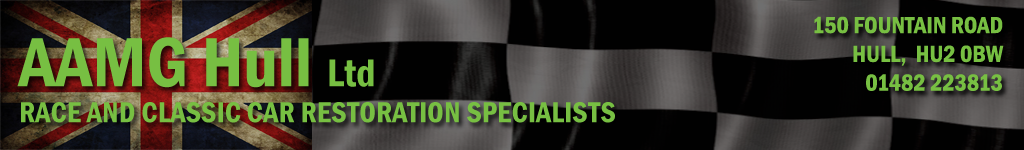
<style>
.page{position:relative;width:1024px;height:150px;background:#010101}
.page>*{position:absolute;margin:0}
.t1{font:24px "FranklinGothic-DemiCond";color:#77bf42}
.t2{font:30px "FranklinGothic-DemiCond";color:#77bf42}
.t3{font:72px "FranklinGothic-DemiCond";color:#77bf42}
.t4{font:40px "FranklinGothic-DemiCond";color:#77bf42}
</style>
<div class="page">
<p class="t1" style="left:814px;top:16px;width:190px;height:75px;text-align:right">150 FOUNTAIN ROAD<br>HULL,  HU2 0BW<br>01482 223813</p>
<p class="t2" style="left:17px;top:37px;width:598px;height:86px"><span class="t3">AAMG Hull </span><span class="t4">Ltd<br></span>RACE AND CLASSIC CAR RESTORATION SPECIALISTS</p>
</div>
